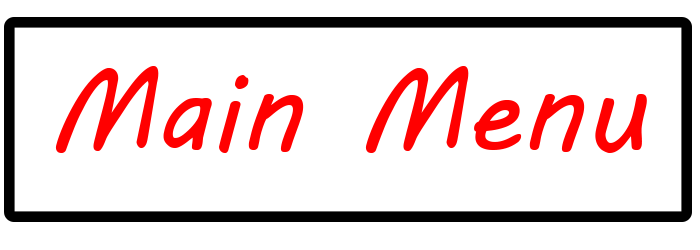
<style>
.page{position:relative;width:700px;height:250px;background:#ffffff}
.page>*{position:absolute;margin:0}
.t1{font:114.4px "MVBoli";color:#ff0000}
</style>
<div class="page">
<p class="t1" style="left:55px;top:66px;width:592px;height:87px">Main Menu</p>
</div>
